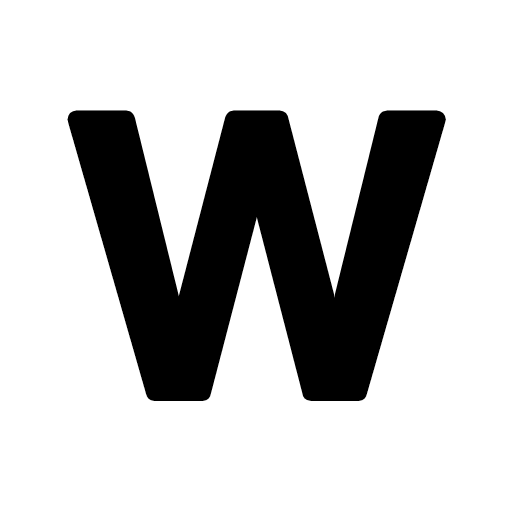
<style>
.page{position:relative;width:512px;height:512px;background:#ffffff}
.page>*{position:absolute;margin:0}
.t1{font:383.3px "PingFangSC-Semibold";color:#000000}
</style>
<div class="page">
<p class="t1" style="left:75px;top:118px;width:363px;height:275px">W</p>
</div>
